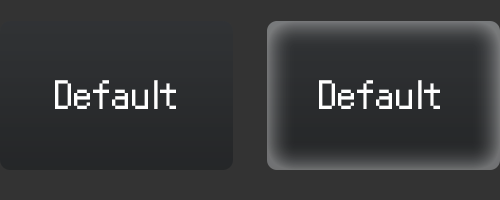
<style>
.page{position:relative;width:500px;height:200px;background:#333333}
.page>*{position:absolute;margin:0}
.t1{font:41.7px "Power-Green";color:#ffffff}
</style>
<div class="page">
<p class="t1" style="left:55px;top:80px;width:121px;height:29px">Default</p>
<p class="t1" style="left:319px;top:80px;width:121px;height:29px">Default</p>
</div>
